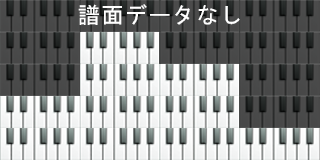
<style>
.page{position:relative;width:320px;height:160px}
.page>*{position:absolute;margin:0}
.t1{font:24px "System";letter-spacing:0.05em;color:#ffffff}
</style>
<div class="page">
<p class="t1" style="left:78px;top:4px;width:162px;height:21px">譜面データなし</p>
</div>
